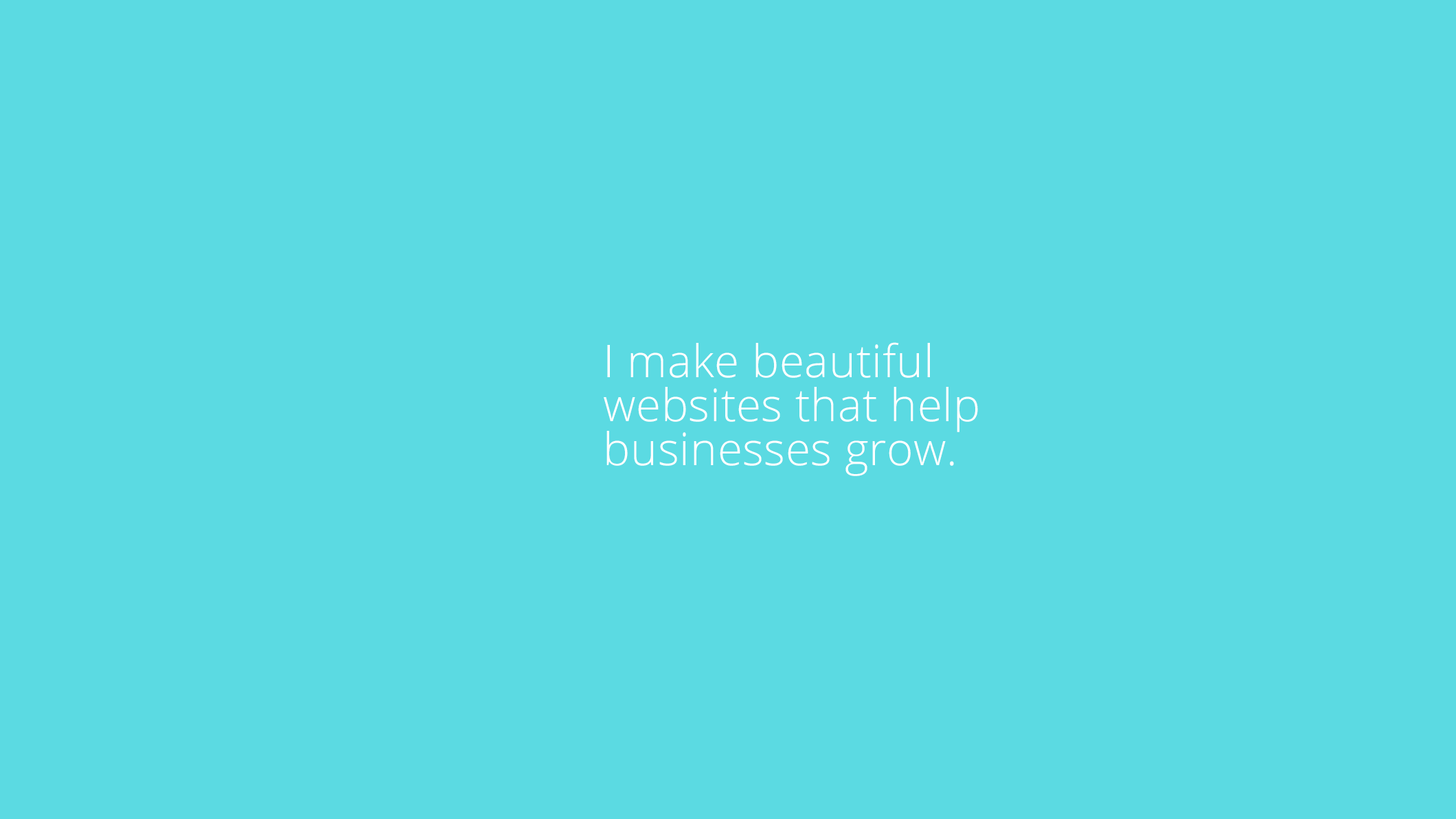
<style>
.page{position:relative;width:1456px;height:819px;background:#5bdae2}
.page>*{position:absolute;margin:0}
.t1{font:45.1px/44px "OpenSans-Light";letter-spacing:0.01em;color:#ffffff}
</style>
<div class="page">
<p class="t1" style="left:604px;top:342px;width:374px;height:134px">I make beautiful <br>websites that help <br>businesses grow.</p>
</div>
